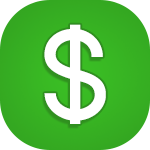
<style>
.page{position:relative;width:150px;height:150px;background:#ffffff}
.page>*{position:absolute;margin:0}
.t1{font:125px "Biko";color:#ffffff}
</style>
<div class="page">
<p class="t1" style="left:44px;top:24px;width:62px;height:100px">$</p>
</div>
